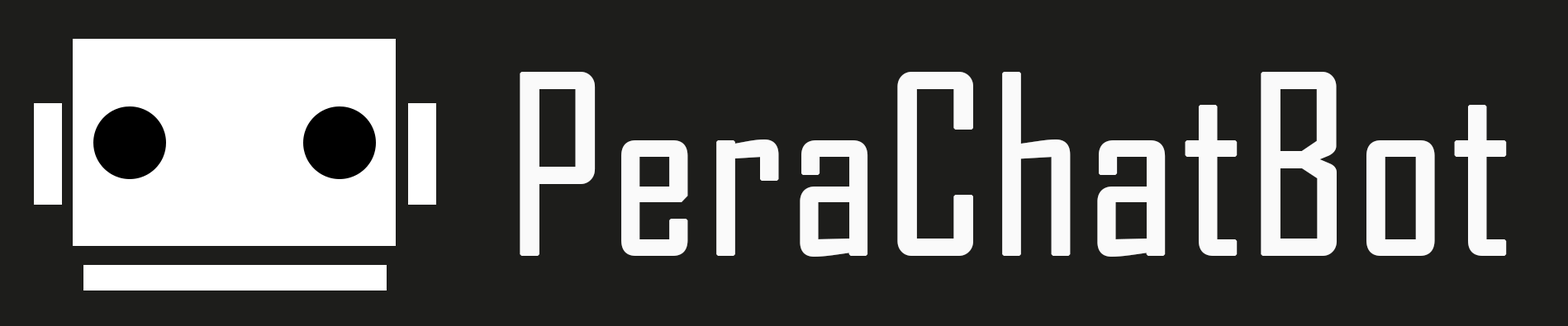
<style>
.page{position:relative;width:1568px;height:326px;background:#1d1d1b}
.page>*{position:absolute;margin:0}
.t1{font:236.2px "AgencyFB-Reg";color:#fafafa;font-weight:bold}
</style>
<div class="page">
<p class="t1" style="left:520px;top:72px;width:987px;height:185px">PeraChatBot</p>
</div>
